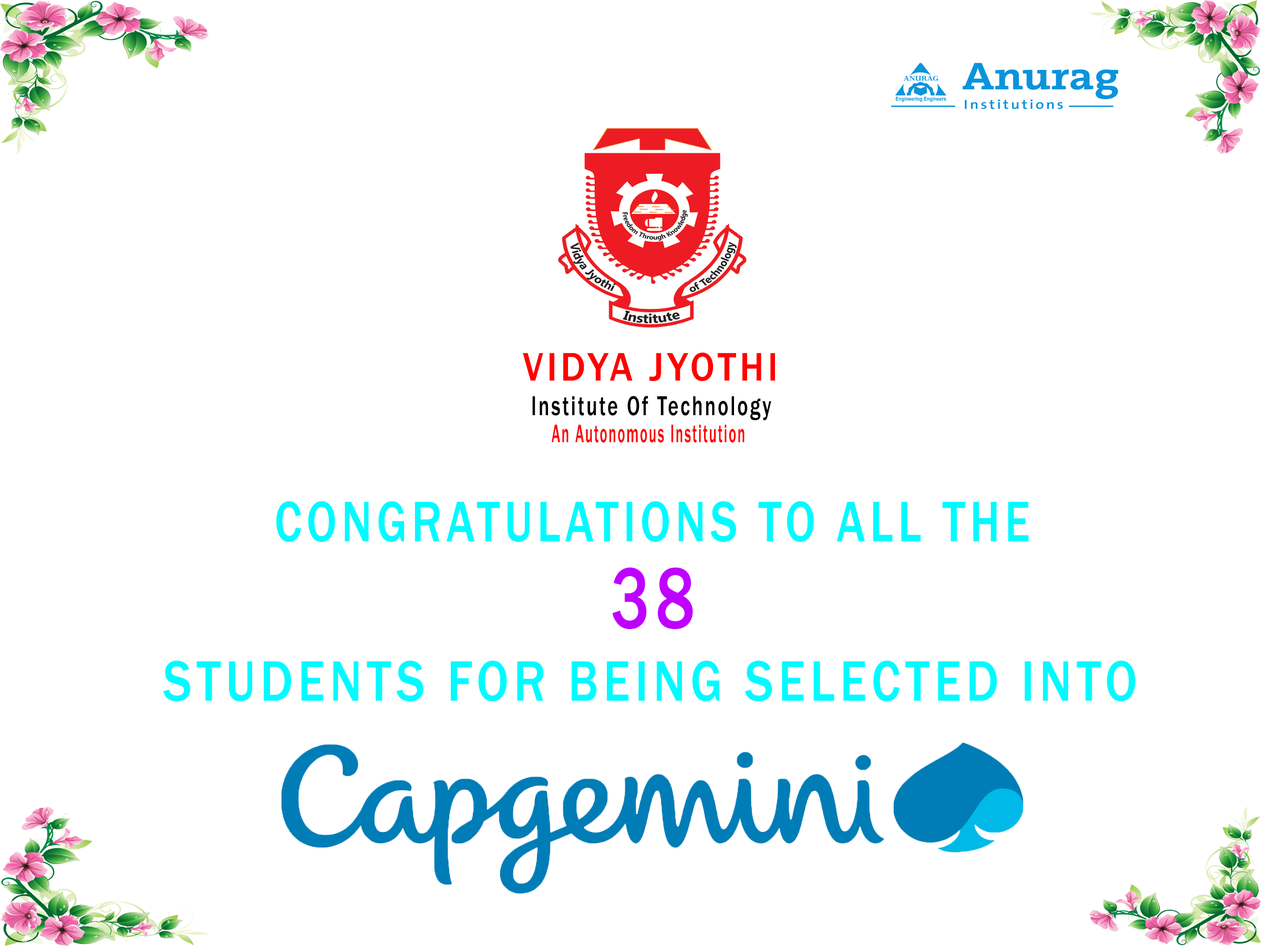
<style>
.page{position:relative;width:1261px;height:946px;background:#ffffff}
.page>*{position:absolute;margin:0}
.t1{font:41.3px "FranklinGothic-Medium";letter-spacing:0.1em;color:#ff0000;scale:0.91 1}
.t2{font:28.3px "FranklinGothic-Medium";letter-spacing:0.1em;color:#000000;scale:0.71 1}
.t3{font:26.3px "FranklinGothic-Medium";letter-spacing:0.1em;color:#ff0000;scale:0.53 1}
.t4{font:59.1px "FranklinGothic-Medium";letter-spacing:0.1em;color:#00fbff;scale:0.8 1}
.t5{font:89.4px "FranklinGothic-Medium";letter-spacing:0.1em;color:#bf00ff;scale:0.73 1}
.t6{font:59.1px "FranklinGothic-Medium";letter-spacing:0.1em;color:#00fbff;scale:0.84 1}
</style>
<div class="page">
<p class="t1" style="left:523px;top:352px;width:252px;height:29px">VIDYA JYOTHI</p>
<p class="t2" style="left:532px;top:396px;width:239px;height:24px">Institute Of Technology</p>
<p class="t3" style="left:552px;top:425px;width:192px;height:17px">An Autonomous Institution</p>
<p class="t4" style="left:276px;top:501px;width:753px;height:41px">CONGRATULATIONS TO ALL THE</p>
<p class="t5" style="left:612px;top:567px;width:81px;height:62px">38</p>
<p class="t6" style="left:163px;top:660px;width:972px;height:41px">STUDENTS FOR BEING SELECTED INTO</p>
</div>
